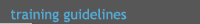
<style>
.page{position:relative;width:200px;height:24px;background:#575758}
.page>*{position:absolute;margin:0}
.t1{font:14px "TrebuchetMS";color:#53aad5}
</style>
<div class="page">
<p class="t1" style="left:11px;top:8px;width:116px;height:15px">training guidelines</p>
</div>
